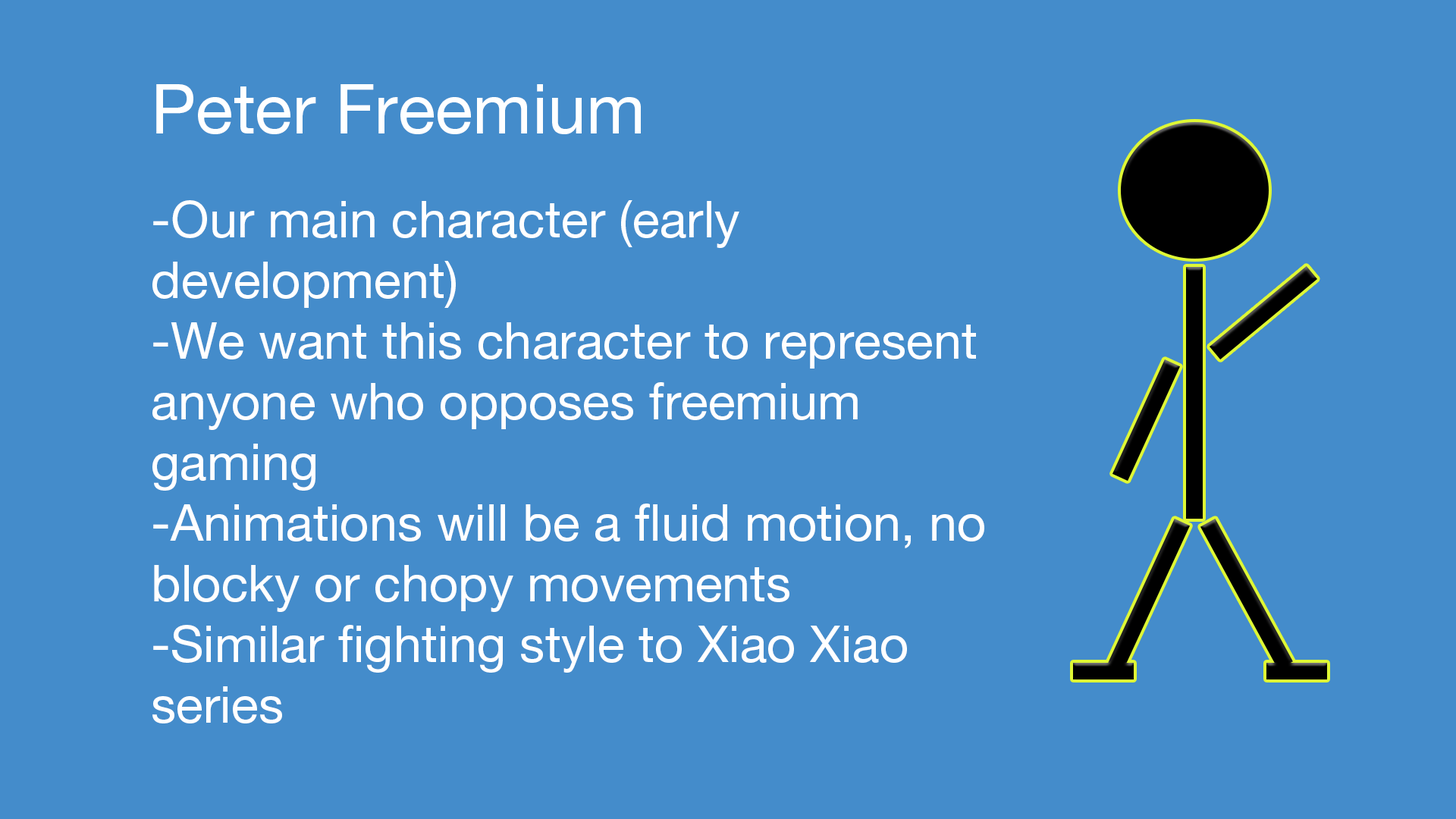
<style>
.page{position:relative;width:1456px;height:819px;background:#448ccb}
.page>*{position:absolute;margin:0}
.t1{font:69.5px "HelveticaNeueLTPro-Roman";color:#feffff}
.t2{font:50.6px "HelveticaNeueLTPro-Roman";color:#ffffff}
</style>
<div class="page">
<p class="t1" style="left:156px;top:84px;width:485px;height:50px">Peter Freemium</p>
<p class="t2" style="left:152px;top:200px;width:832px;height:523px">-Our main character (early<br>development)<br>-We want this character to represent anyone who opposes freemium gaming<br>-Animations will be a fluid motion, no blocky or chopy movements<br>-Similar fighting style to Xiao Xiao series</p>
</div>
